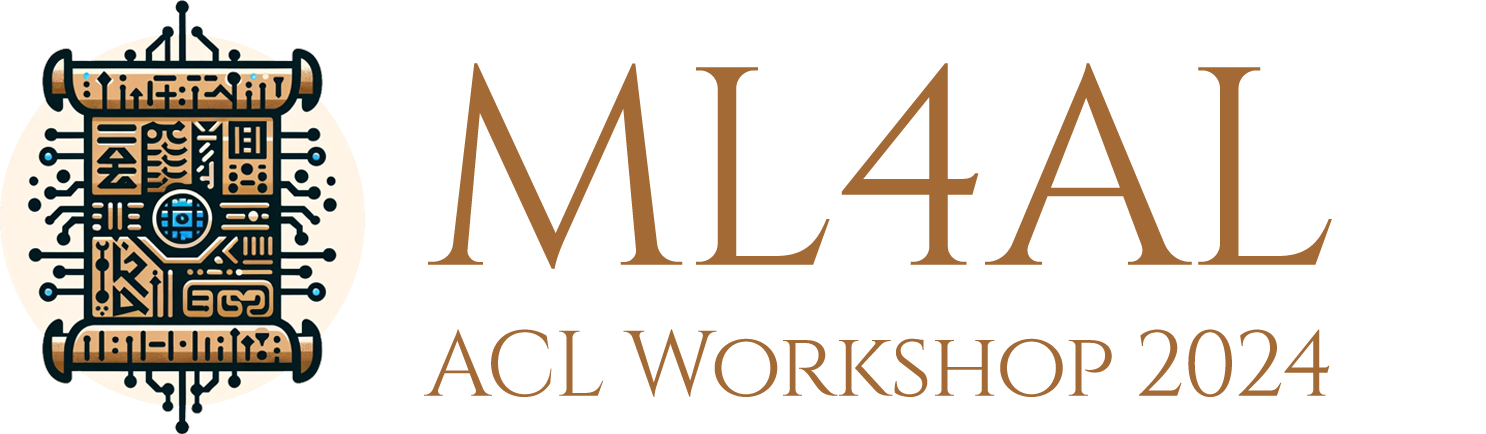
<style>
.page{position:relative;width:1486px;height:434px;background:#ffffff}
.page>*{position:absolute;margin:0}
.t1{font:281.8px "Cinzel-Regular";letter-spacing:-0.025em;color:#a36a36}
.t2{font:92.8px "Cinzel-Regular";letter-spacing:-0.025em;color:#a36a36}
</style>
<div class="page">
<p class="t1" style="left:428px;top:63px;width:904px;height:206px">ML4AL</p>
<p class="t2" style="left:424px;top:329px;width:906px;height:68px">ACL Workshop 2024</p>
</div>
